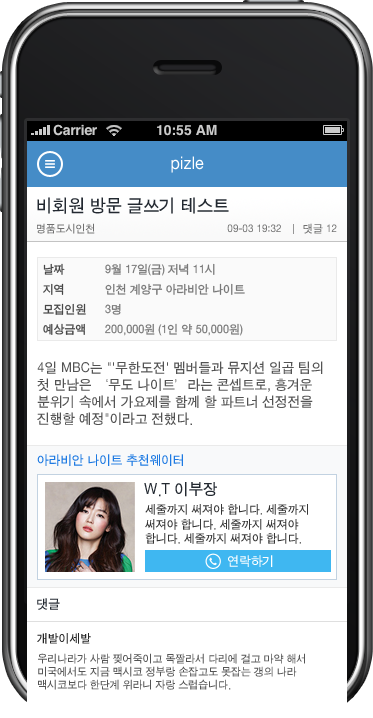
<style>
.page{position:relative;width:373px;height:718px;background:#ffffff}
.page>*{position:absolute;margin:0}
.t1{font:18px "SandTg";color:#ffffff}
.t2{font:18px "SandTg";color:#232931}
.t3{font:11px "SandTg";color:#707070}
.t4{font:12px/20px "SandTg";color:#464646}
.t5{font:12px/20px "SandTg";color:#787878}
.t6{font:14px "SandTg";color:#535353}
.t7{font:13px "SandTg";color:#1e7ae2}
.t8{font:16px "SandTg";color:#232931}
.t9{font:12px "SandTg";color:#363636}
.t10{font:13px "SandTg";color:#ffffff}
.t11{font:13px "SandTg";color:#232931}
.t12{font:12px "SandTg";color:#252525}
.t13{font:11px "SandTg";color:#555555}
</style>
<div class="page">
<p class="t1" style="left:171px;top:156px;width:33px;height:17px">pizle</p>
<p class="t2" style="left:37px;top:197px;width:192px;height:17px">비회원 방문 글쓰기 테스트</p>
<p class="t3" style="left:37px;top:223px;width:58px;height:11px">명품도시인천</p>
<p class="t3" style="left:227px;top:223px;width:110px;height:11px">09-03 19:32       댓글 12</p>
<p class="t4" style="left:43px;top:263px;width:43px;height:72px">날짜<br>지역<br>모집인원<br>예상금액</p>
<p class="t5" style="left:105px;top:263px;width:140px;height:73px">9월 17일(금) 저녁 11시<br>인천 계양구 아라비안 나이트<br>3명<br>200,000원 (1인 약 50,000원)</p>
<p class="t6" style="left:37px;top:361px;width:286px;height:65px">4일 MBC는 "'무한도전' 멤버들과 뮤지션 일곱 팀의 첫 만남은 ‘무도 나이트’라는 콘셉트로, 흥겨운 분위기 속에서 가요제를 함께 할 파트너 선정전을 진행할 예정"이라고 전했다.<br>v</p>
<p class="t7" style="left:37px;top:454px;width:146px;height:12px">아라비안 나이트 추천웨이터</p>
<p class="t8" style="left:144px;top:482px;width:73px;height:15px">W.T 이부장</p>
<p class="t9" style="left:145px;top:504px;width:163px;height:40px">세줄까지 써져야 합니다. 세줄까지 써져야 합니다. 세줄까지 써져야 합니다. 세줄까지 써져야 합니다.</p>
<p class="t10" style="left:228px;top:555px;width:45px;height:12px">연락하기</p>
<p class="t11" style="left:37px;top:598px;width:23px;height:12px">댓글</p>
<p class="t12" style="left:37px;top:633px;width:54px;height:11px">개발이세발</p>
<p class="t13" style="left:38px;top:653px;width:267px;height:37px">우리나라가 사람 찢어죽이고 목짤라서 다리에 걸고 마약 해서 미국에서도 지금 맥시코 정부랑 손잡고도 못잡는 갱의 나라 맥시코보다 한단계 위라니 자랑 스럽습니다.</p>
</div>
